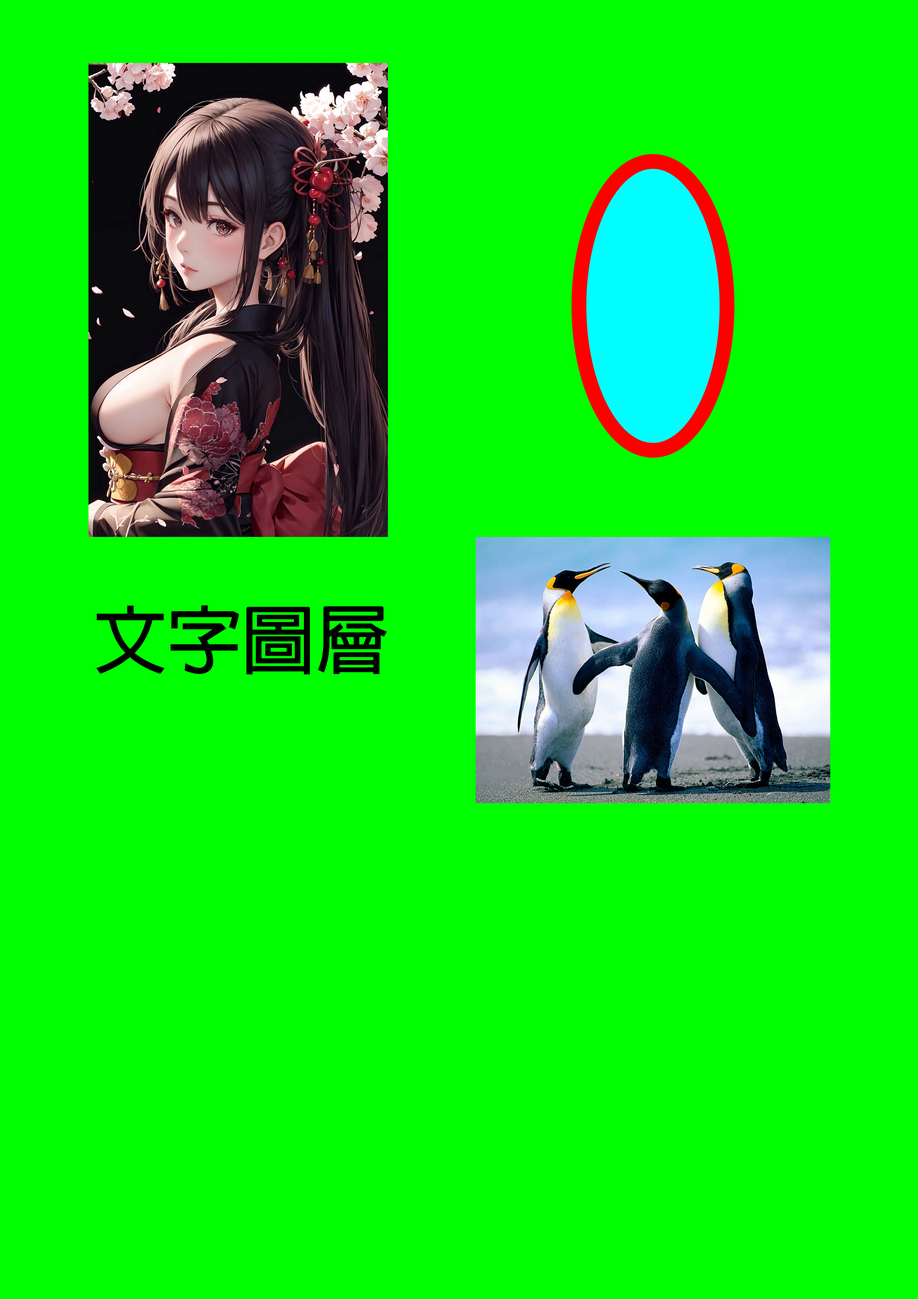
<style>
.page{position:relative;width:918px;height:1299px;background:#00ff00}
.page>*{position:absolute;margin:0}
.t1{font:74px "AdobeFanHeitiStd-Bold";color:#000000}
</style>
<div class="page">
<p class="t1" style="left:96px;top:605px;width:291px;height:70px">文字圖層</p>
</div>
